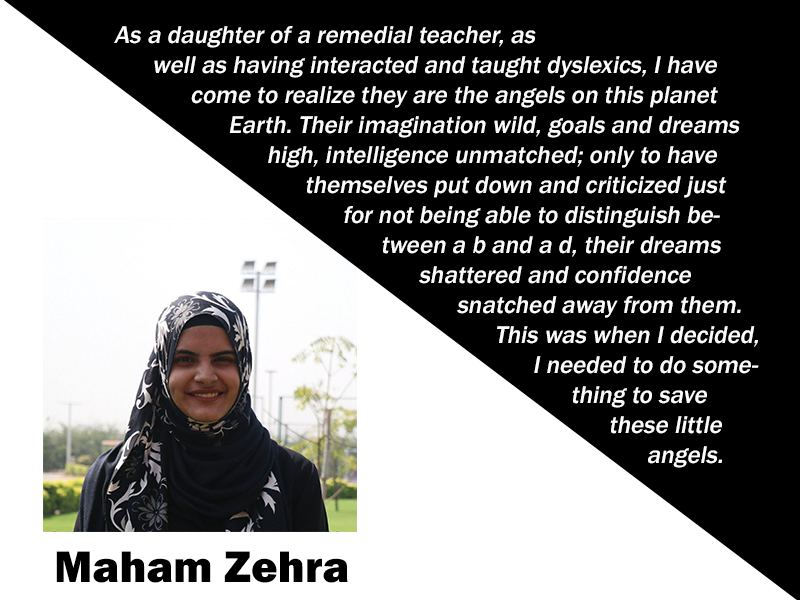
<style>
.page{position:relative;width:800px;height:600px;background:#000000}
.page>*{position:absolute;margin:0}
.t1{font:25px "FranklinGothic-Medium";color:#fcfcfc;font-style:italic}
.t2{font:45.8px "FranklinGothic-Heavy";color:#000000}
</style>
<div class="page">
<p class="t1" style="left:114px;top:26px;width:645px;height:442px">As a daughter of a remedial teacher, as well as having interacted and taught dyslexics, I have come to realize they are the angels on this planet Earth. Their imagination wild, goals and dreams high, intelligence unmatched; only to have themselves put down and criticized just for not being able to distinguish between a b and a d, their dreams shattered and confidence snatched away from them.  This was when I decided, I needed to do something to save these little angels.</p>
<p class="t2" style="left:56px;top:551px;width:292px;height:32px">Maham Zehra</p>
</div>
